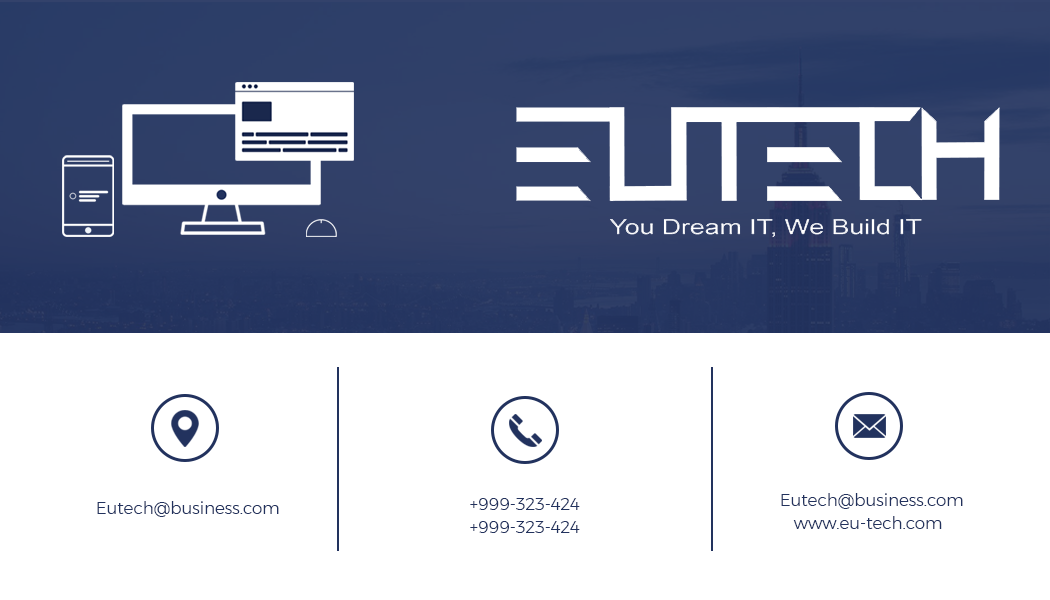
<style>
.page{position:relative;width:1050px;height:600px;background:#ffffff}
.page>*{position:absolute;margin:0}
.t1{font:16.7px "Montserrat-Light";color:#22325e}
</style>
<div class="page">
<p class="t1" style="left:781px;top:493px;width:182px;height:16px">Eutech@business.com</p>
<p class="t1" style="left:97px;top:501px;width:182px;height:16px">Eutech@business.com</p>
<p class="t1" style="left:470px;top:498px;width:110px;height:12px">+999-323-424</p>
<p class="t1" style="left:470px;top:521px;width:110px;height:12px">+999-323-424</p>
<p class="t1" style="left:793px;top:516px;width:149px;height:13px">www.eu-tech.com</p>
</div>
